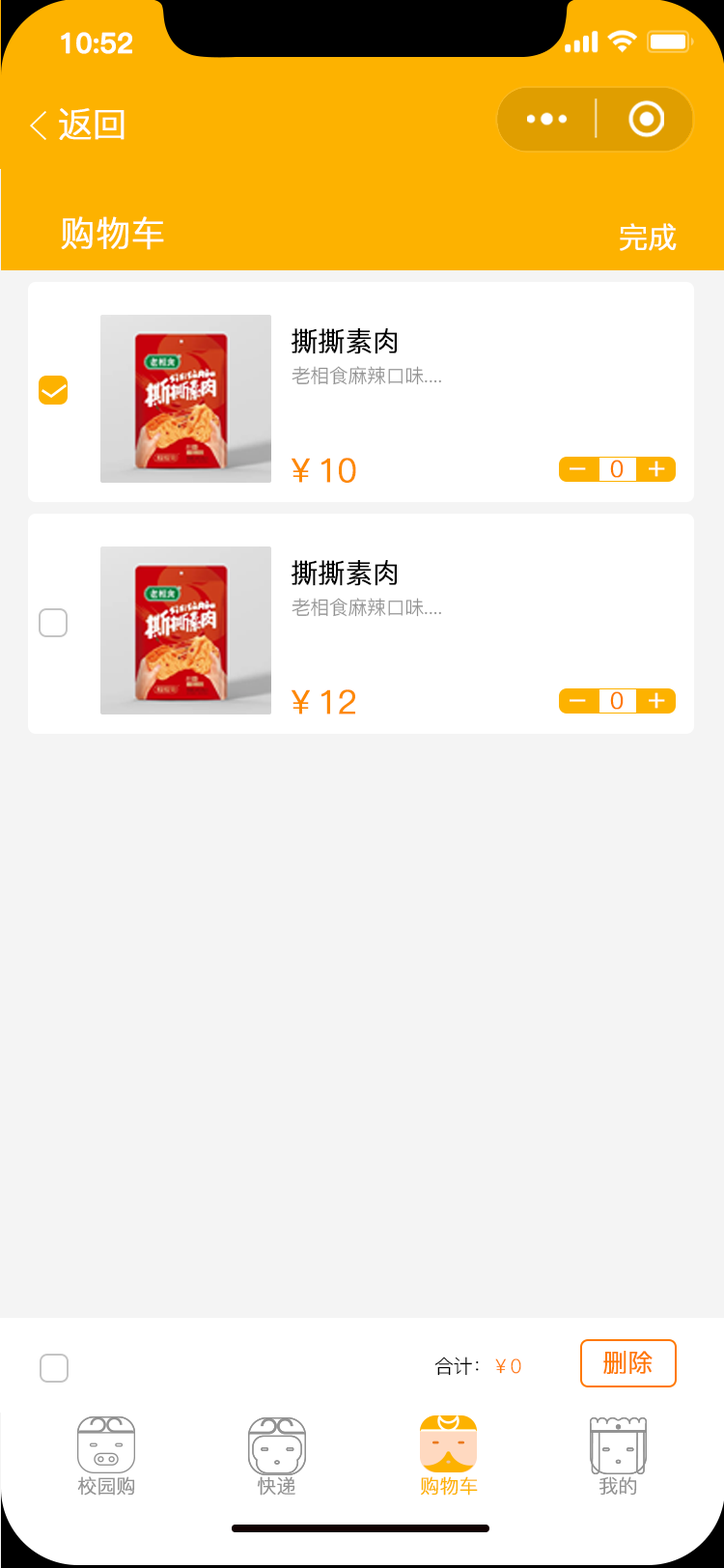
<style>
.page{position:relative;width:724px;height:1568px;background:#f4f4f4}
.page>*{position:absolute;margin:0}
.t1{font:27.5px "PingFang-SC-Bold";letter-spacing:-0.02em;color:#ffffff;font-weight:bold}
.t2{font:34.8px "PingFang-SC-Regular";letter-spacing:-0.02em;color:#ffffff;font-weight:bold}
.t3{font:29px "PingFang-SC-Regular";letter-spacing:-0.02em;color:#ffffff;font-weight:bold}
.t4{font:27px "PingFang-SC-Regular";letter-spacing:-0.02em;color:#000000;font-weight:bold}
.t5{font:19.3px "PingFang-SC-Regular";letter-spacing:-0.02em;color:#919191}
.t6{font:32.8px "PingFang-SC-Regular";letter-spacing:-0.02em;color:#fd8900;font-weight:bold}
.t7{font:23.2px "PingFang-SC-Regular";letter-spacing:-0.02em;color:#ff7900;font-weight:bold}
.t8{font:19.3px "PingFang-SC-Regular";letter-spacing:-0.02em;color:#000000}
.t9{font:19.3px "PingFang-SC-Regular";letter-spacing:-0.02em;color:#ff7900}
.t10{font:25.1px "PingFang-SC-Regular";letter-spacing:-0.02em;color:#ff7900;font-weight:bold}
.t11{font:19.3px "PingFang-SC-Regular";letter-spacing:-0.02em;color:#919191;font-weight:bold}
.t12{font:19.3px "PingFang-SC-Regular";letter-spacing:-0.02em;color:#fdb200;font-weight:bold}
</style>
<div class="page">
<p class="t1" style="left:61px;top:32px;width:71px;height:22px">10:52</p>
<p class="t2" style="left:59px;top:108px;width:66px;height:32px">返回</p>
<p class="t2" style="left:61px;top:216px;width:103px;height:34px">购物车</p>
<p class="t3" style="left:620px;top:223px;width:57px;height:28px">完成</p>
<p class="t4" style="left:292px;top:328px;width:105px;height:26px">撕撕素肉</p>
<p class="t5" style="left:292px;top:366px;width:149px;height:19px">老相食麻辣口味....</p>
<p class="t6" style="left:292px;top:458px;width:64px;height:25px">￥10</p>
<p class="t7" style="left:610px;top:460px;width:14px;height:18px">0</p>
<p class="t3" style="left:649px;top:461px;width:16px;height:16px">+</p>
<p class="t3" style="left:570px;top:467px;width:16px;height:3px">-</p>
<p class="t4" style="left:292px;top:560px;width:105px;height:26px">撕撕素肉</p>
<p class="t5" style="left:292px;top:598px;width:149px;height:19px">老相食麻辣口味....</p>
<p class="t6" style="left:292px;top:689px;width:63px;height:25px">￥12</p>
<p class="t3" style="left:570px;top:699px;width:16px;height:3px">-</p>
<p class="t7" style="left:610px;top:691px;width:14px;height:19px">0</p>
<p class="t3" style="left:649px;top:692px;width:16px;height:17px">+</p>
<p class="t8" style="left:434px;top:1357px;width:87px;height:19px">合计：<span class="t9">￥0</span></p>
<p class="t10" style="left:603px;top:1351px;width:50px;height:23px">删除</p>
<p class="t11" style="left:77px;top:1476px;width:58px;height:20px">校园购</p>
<p class="t11" style="left:257px;top:1476px;width:38px;height:20px">快递</p>
<p class="t12" style="left:421px;top:1476px;width:57px;height:20px">购物车</p>
<p class="t11" style="left:600px;top:1476px;width:37px;height:20px">我的</p>
</div>
